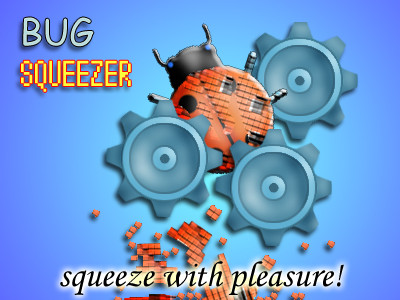
<style>
.page{position:relative;width:400px;height:300px}
.page>*{position:absolute;margin:0}
.t1{font:36px "ComicSansMS";color:#bfdfde}
.t2{font:36px "Terminal";color:#fffd3c}
.t3{font:36px "MonotypeCorsiva";color:#000000}
</style>
<div class="page">
<p class="t1" style="left:23px;top:17px;width:71px;height:30px">BUG</p>
<p class="t2" style="left:21px;top:60px;width:110px;height:32px">SQUEEZER</p>
<p class="t3" style="left:60px;top:261px;width:284px;height:34px">squeeze with pleasure!</p>
</div>
